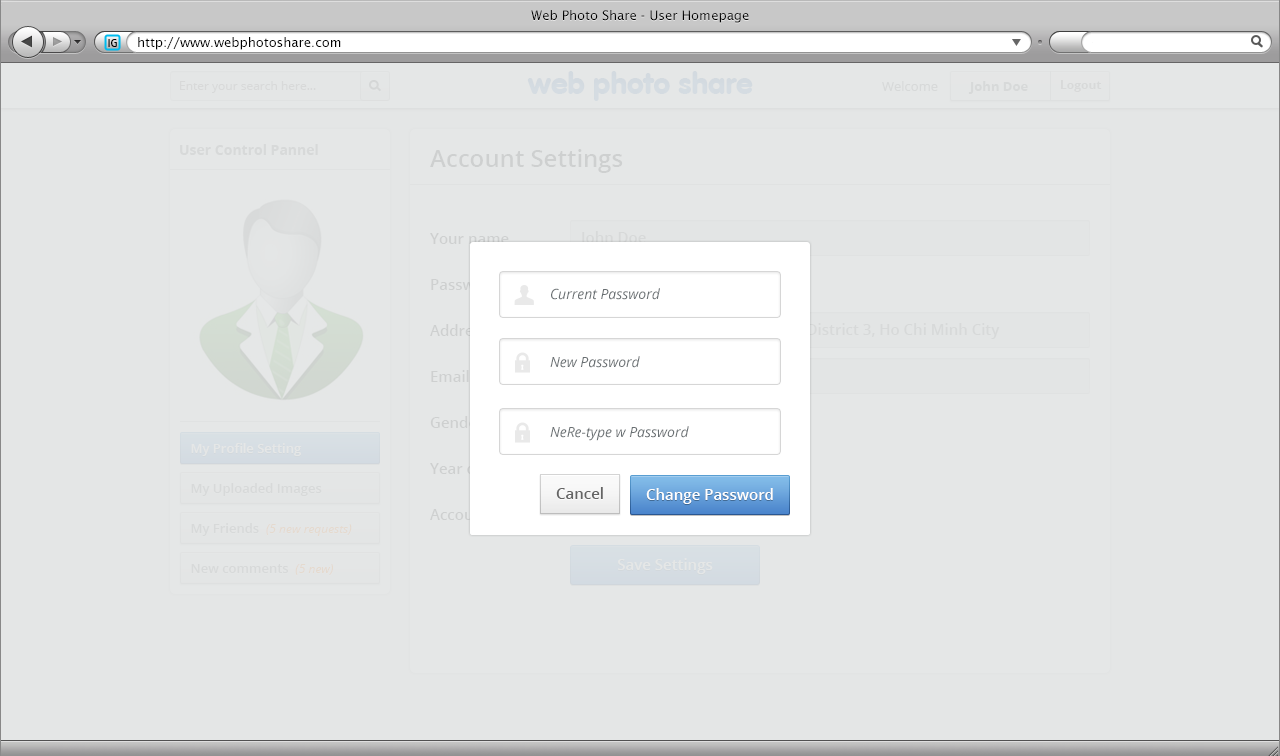
<style>
.page{position:relative;width:1280px;height:756px;background:#e5e7e7}
.page>*{position:absolute;margin:0}
.t1{font:13px "LucidaSans";color:#000000}
.t2{font:12px "Dax-Regular";color:#000000}
.t3{font:30px "VAGRounded-Black";color:#d4dbe1}
.t4{font:12px "OpenSans";color:#d8d9d9}
.t5{font:13px "OpenSans";color:#d7d9d9}
.t6{font:13px "OpenSans-Bold";color:#d7d9d9}
.t7{font:12px "OpenSans-Bold";color:#d8d9d9}
.t8{font:14px "OpenSans-Bold";color:#d7d9d9}
.t9{font:24px "OpenSans-Semibold";color:#ced0d0}
.t10{font:15px "OpenSans-Semibold";color:#d7d9d9}
.t11{font:14px "OpenSans-Italic";color:#6a7073}
.t12{font:13px "OpenSans-Semibold";color:#e5e7e7}
.t13{font:13px "OpenSans-Semibold";color:#d7d9d9}
.t14{font:15px "OpenSans-Semibold";color:#646464}
.t15{font:15px "OpenSans-Semibold";color:#ffffff}
.t16{font:12px "OpenSans-Italic";color:#d7d9d9}
.t17{font:15px "OpenSans-Semibold";color:#e5e7e7}
</style>
<div class="page">
<p class="t1" style="left:531px;top:10px;width:218px;height:13px">Web Photo Share - User Homepage</p>
<p class="t2" style="left:108px;top:39px;width:9px;height:8px">IG</p>
<p class="t1" style="left:138px;top:37px;width:203px;height:13px">http://www.webphotoshare.com</p>
<p class="t3" style="left:527px;top:71px;width:226px;height:30px">web photo share</p>
<p class="t4" style="left:180px;top:81px;width:136px;height:12px">Enter your search here...</p>
<p class="t5" style="left:882px;top:81px;width:56px;height:10px">Welcome</p>
<p class="t6" style="left:968px;top:81px;width:60px;height:13px">John Doe</p>
<p class="t7" style="left:1060px;top:80px;width:42px;height:12px">Logout</p>
<p class="t8" style="left:180px;top:144px;width:138px;height:11px">User Control Pannel</p>
<p class="t9" style="left:430px;top:149px;width:193px;height:24px">Account Settings</p>
<p class="t10" style="left:579px;top:231px;width:67px;height:15px">John Doe</p>
<p class="t11" style="left:551px;top:288px;width:109px;height:12px">Current Password</p>
<p class="t11" style="left:550px;top:356px;width:90px;height:12px">New Password</p>
<p class="t11" style="left:550px;top:426px;width:139px;height:15px">NeRe-type w Password</p>
<p class="t12" style="left:191px;top:443px;width:111px;height:13px">My Profile Setting</p>
<p class="t13" style="left:191px;top:483px;width:131px;height:13px">My Uploaded Images</p>
<p class="t14" style="left:556px;top:487px;width:47px;height:12px">Cancel</p>
<p class="t15" style="left:646px;top:488px;width:127px;height:16px">Change Password</p>
<p class="t16" style="left:191px;top:523px;width:161px;height:13px"><span class="t13">My Friends  </span>(5 new requests)</p>
<p class="t17" style="left:618px;top:558px;width:95px;height:16px">Save Settings</p>
<p class="t13" style="left:191px;top:564px;width:142px;height:11px">New comments  <span class="t16">(5 new)</span></p>
</div>
